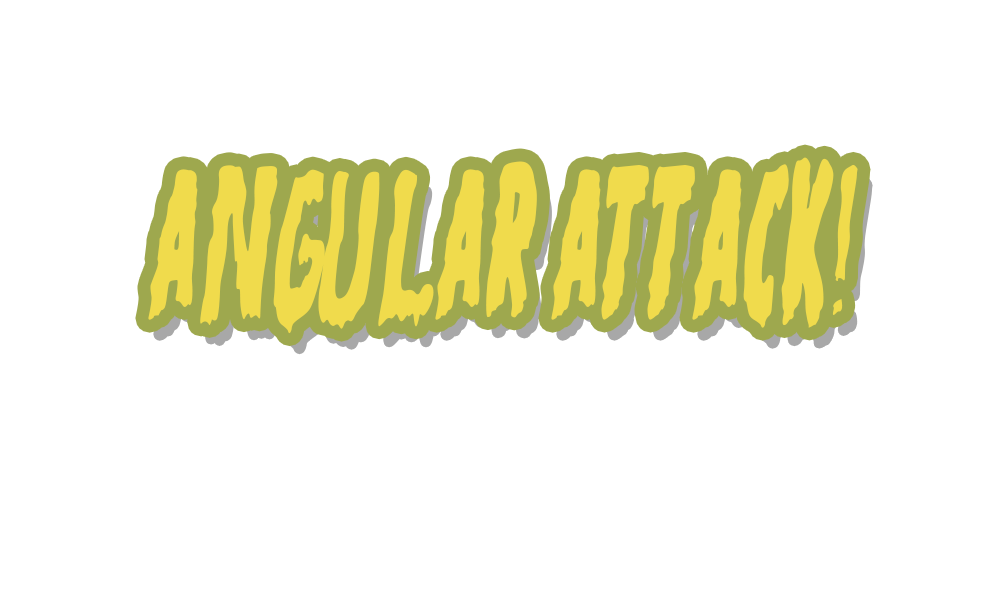
<style>
.page{position:relative;width:1000px;height:600px;background:#ffffff}
.page>*{position:absolute;margin:0}
.t1{font:408.3px "MarsAttacks-Regular";color:#f0db4c;scale:0.62 1}
</style>
<div class="page">
<p class="t1" style="left:148px;top:157px;width:710px;height:177px">ANGULAR ATTACK!</p>
</div>
